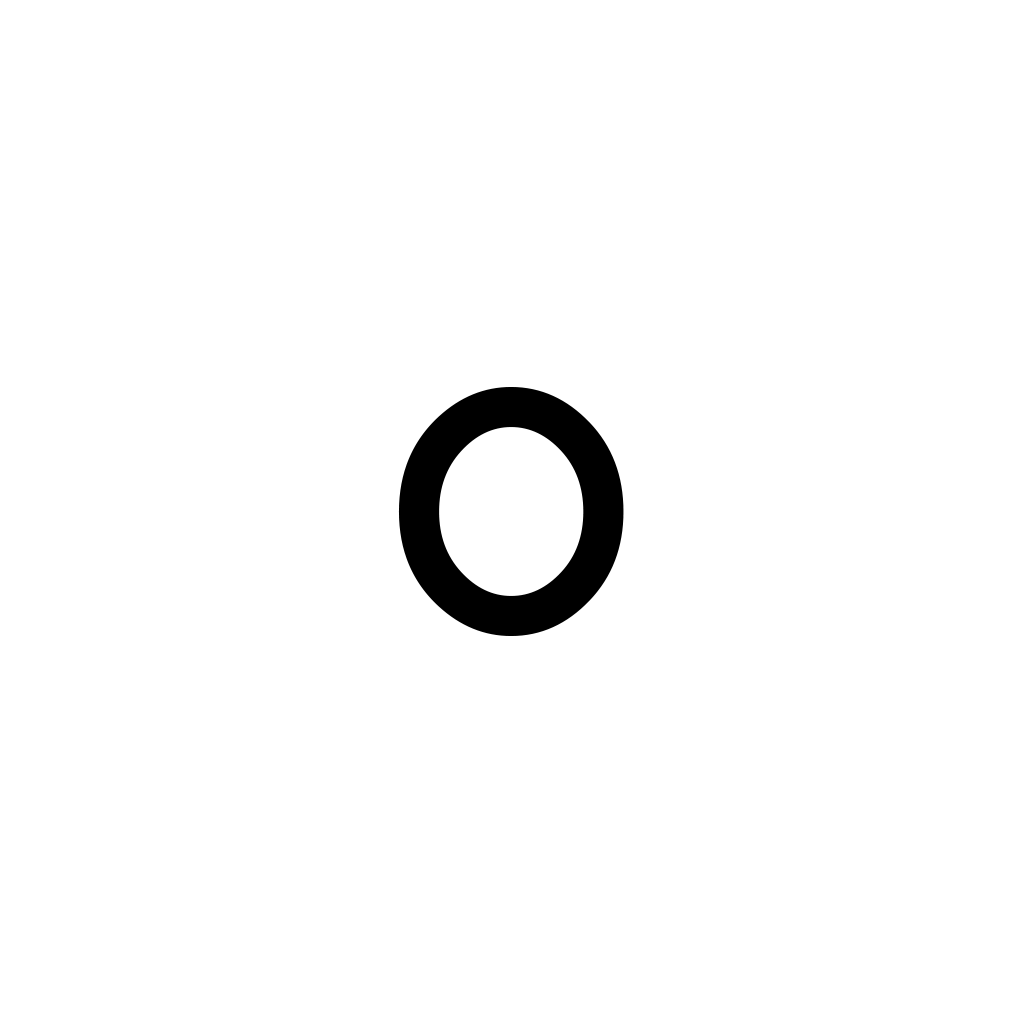
<style>
.page{position:relative;width:1024px;height:1024px;background:#ffffff}
.page>*{position:absolute;margin:0}
.t1{font:400px "CourierNewPS-BoldMT";color:#000000}
</style>
<div class="page">
<p class="t1" style="left:398px;top:387px;width:226px;height:249px">O</p>
</div>
